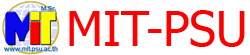
<style>
.page{position:relative;width:250px;height:55px;background:#ffffff}
.page>*{position:absolute;margin:0}
.t1{font:48px "Tahoma";color:#ff0000}
</style>
<div class="page">
<p class="t1" style="left:69px;top:10px;width:176px;height:37px">MIT-PSU</p>
</div>
